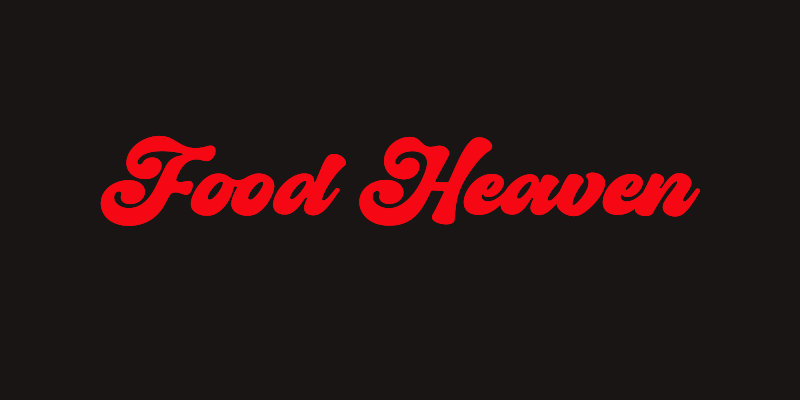
<style>
.page{position:relative;width:800px;height:400px;background:#191515}
.page>*{position:absolute;margin:0}
.t1{font:89.8px "Midstar";color:#f50813;scale:1.19 1}
</style>
<div class="page">
<p class="t1" style="left:100px;top:135px;width:600px;height:91px">Food Heaven</p>
<p class="t1" style="left:100px;top:135px;width:600px;height:91px">Food Heaven</p>
</div>
